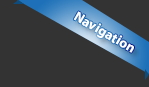
<style>
.page{position:relative;width:149px;height:87px;background:#333333}
.page>*{position:absolute;margin:0}
.t1{font:13.8px "MyriadPro-Bold";color:#ffffff}
</style>
<div class="page">
<p class="t1" style="left:73px;top:11px;width:61px;height:42px;rotate:30deg">Navigation</p>
</div>
